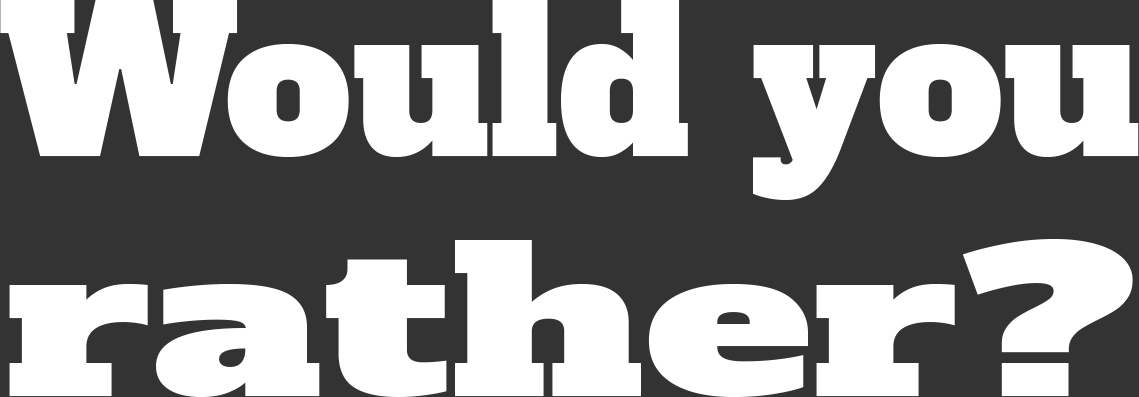
<style>
.page{position:relative;width:1139px;height:397px;background:#333333}
.page>*{position:absolute;margin:0}
.t1{font:200px "AlfaSlabOne-Regular";color:#ffffff}
.t2{font:200px "AlfaSlabOne-Regular";color:#ffffff;scale:1.4 1}
</style>
<div class="page">
<p class="t1" style="left:0px;top:0px;width:1139px;height:397px;text-align:center">Would you<br><span class="t2">rather?</span></p>
</div>
